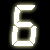
<style>
.page{position:relative;width:50px;height:50px;background:#000000}
.page>*{position:absolute;margin:0}
.t1{font:55px "LiquidCrystal";color:#ffffff}
</style>
<div class="page">
<p class="t1" style="left:12px;top:5px;width:25px;height:41px">6</p>
</div>
